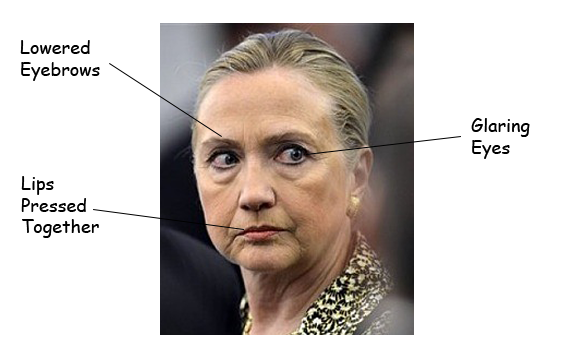
<style>
.page{position:relative;width:576px;height:360px;background:#ffffff}
.page>*{position:absolute;margin:0}
.t1{font:18px "ComicSansMS";color:#000000}
</style>
<div class="page">
<p class="t1" style="left:20px;top:40px;width:80px;height:41px">Lowered<br>Eyebrows</p>
<p class="t1" style="left:471px;top:118px;width:59px;height:41px">Glaring<br>Eyes</p>
<p class="t1" style="left:21px;top:176px;width:78px;height:62px">Lips<br>Pressed<br>Together</p>
</div>
